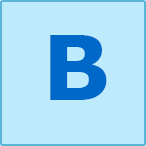
<style>
.page{position:relative;width:146px;height:146px;background:#beebfc}
.page>*{position:absolute;margin:0}
.t1{font:90px "Verdana-Bold";color:#0068c9}
</style>
<div class="page">
<p class="t1" style="left:50px;top:35px;width:57px;height:65px">B</p>
</div>
